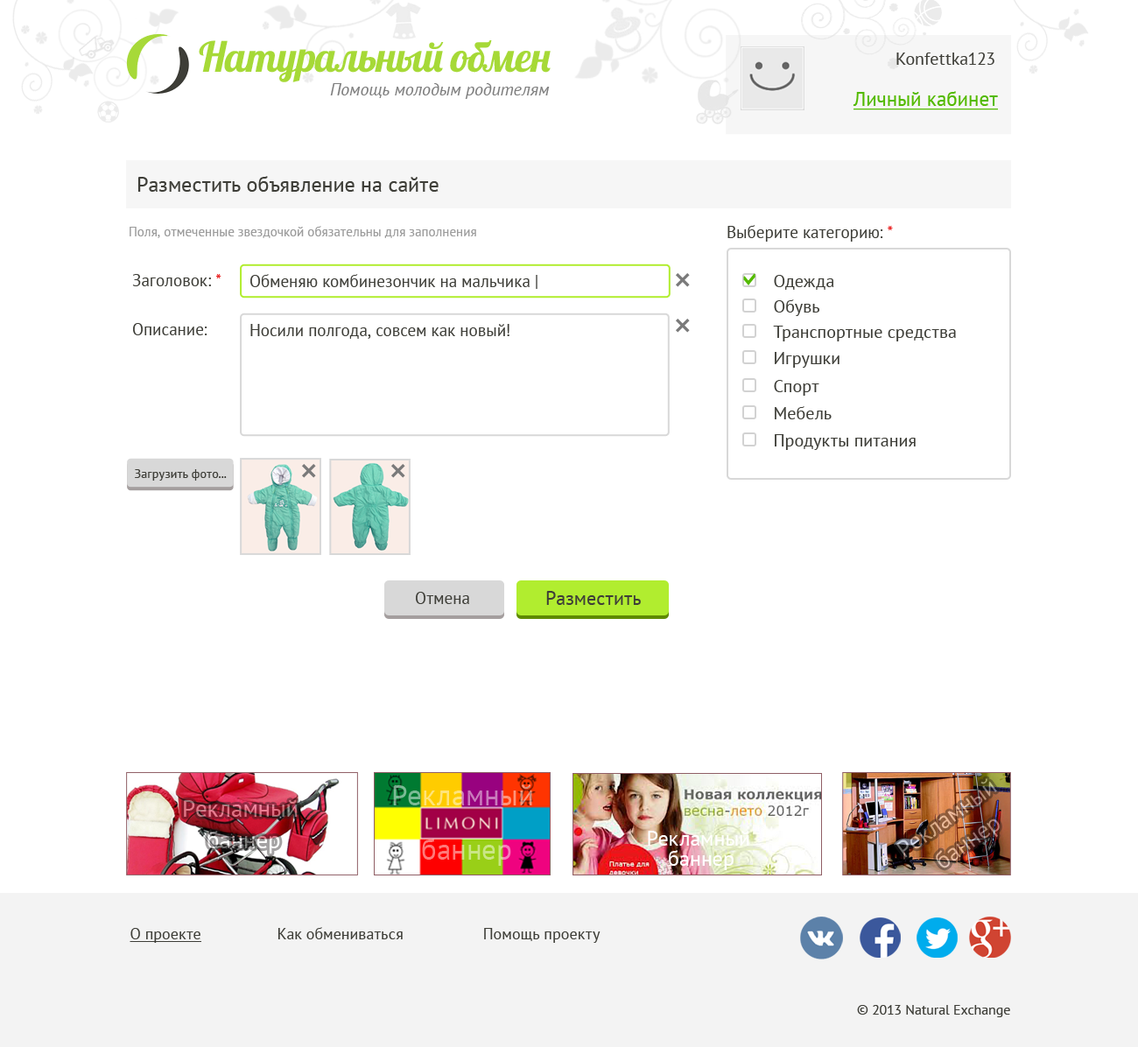
<style>
.page{position:relative;width:1138px;height:1047px;background:#ffffff}
.page>*{position:absolute;margin:0}
.t1{font:41.5px "Lobster";letter-spacing:-0.08em;color:#a6d937}
.t2{font:17.5px "PTSans-Regular";color:#3e3e38}
.t3{font:17.5px "PTSans-Italic";color:#7f7f7f}
.t4{font:20.1px "PTSans-Regular";color:#53ba00;text-decoration:underline}
.t5{font:21px "PTSans-Regular";color:#3e3e38}
.t6{font:13.1px "PTSans-Regular";color:#9c9c9c}
.t7{font:16.6px "PTSans-Regular";color:#3c3c36}
.t8{font:16.6px "PTSans-Regular";color:#e91a1a}
.t9{font:16.6px "PTSans-Regular";color:#3e3e38}
.t10{font:12.4px "PTSans-Regular";color:#3e3e38}
.t11{font:19.3px "PTSans-Regular";color:#3e3e38}
.t12{font:23.7px/31.6px "PTSans-Regular"}
.t13{font:21px/20.1px "PTSans-Regular";color:#ffffff}
.t14{font:15.8px "PTSans-Regular";color:#3e3e38}
.t15{font:15.8px "PTSans-Regular";color:#3e3e38;text-decoration:underline}
.t16{font:14px "PTSans-Regular";color:#3e3e38}
</style>
<div class="page">
<p class="t1" style="left:199px;top:40px;width:352px;height:42px">Натуральный  обмен</p>
<p class="t2" style="left:897px;top:53px;width:98px;height:12px">Konfettka123</p>
<p class="t3" style="left:330px;top:83px;width:220px;height:16px">Помощь молодым родителям</p>
<p class="t4" style="left:853px;top:91px;width:145px;height:19px">Личный кабинет</p>
<p class="t5" style="left:137px;top:176px;width:302px;height:16px">Разместить объявление на сайте</p>
<p class="t6" style="left:130px;top:226px;width:346px;height:12px">Поля, отмеченные звездочкой обязательны для заполнения</p>
<p class="t7" style="left:728px;top:225px;width:165px;height:17px">Выберите категорию: <span class="t8">*</span></p>
<p class="t9" style="left:132px;top:274px;width:90px;height:12px">Заголовок: <span class="t8">*</span></p>
<p class="t9" style="left:250px;top:274px;width:288px;height:15px">Обменяю комбинезончик на мальчика |</p>
<p class="t2" style="left:774px;top:275px;width:61px;height:15px">Одежда</p>
<p class="t2" style="left:774px;top:300px;width:46px;height:16px">Обувь</p>
<p class="t9" style="left:133px;top:323px;width:75px;height:12px">Описание:</p>
<p class="t9" style="left:250px;top:324px;width:260px;height:15px">Носили полгода, совсем как новый!</p>
<p class="t2" style="left:773px;top:326px;width:183px;height:16px">Транспортные средства</p>
<p class="t2" style="left:775px;top:352px;width:65px;height:16px">Игрушки</p>
<p class="t2" style="left:774px;top:380px;width:46px;height:16px">Спорт</p>
<p class="t2" style="left:775px;top:406px;width:57px;height:13px">Мебель</p>
<p class="t2" style="left:775px;top:434px;width:141px;height:16px">Продукты питания</p>
<p class="t10" style="left:135px;top:469px;width:92px;height:12px">Загрузить фото...</p>
<p class="t9" style="left:416px;top:592px;width:53px;height:12px">Отмена</p>
<p class="t11" style="left:546px;top:591px;width:95px;height:14px">Разместить</p>
<p class="t12" style="left:896px;top:779px;width:104px;height:90px;text-align:center;rotate:-36deg">Рекламный <br>баннер</p>
<p class="t13" style="left:648px;top:831px;width:102px;height:39px;text-align:center">Рекламный <br>баннер</p>
<p class="t14" style="left:130px;top:927px;width:471px;height:16px"><span class="t15">О проекте</span>       Как обмениваться            Помощь  проекту</p>
<p class="t16" style="left:857px;top:1005px;width:154px;height:13px">© 2013 Natural Exchange</p>
</div>
